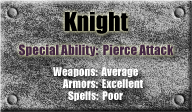
<style>
.page{position:relative;width:192px;height:112px}
.page>*{position:absolute;margin:0}
.t1{font:24px "Impact";color:#000000}
.t2{font:13px "Impact";color:#422742}
.t3{font:11px "Impact";color:#ffffff}
</style>
<div class="page">
<p class="t1" style="left:64px;top:12px;width:64px;height:22px">Knight</p>
<p class="t2" style="left:19px;top:44px;width:155px;height:13px">Special Ability:  Pierce Attack</p>
<p class="t3" style="left:53px;top:67px;width:85px;height:11px">Weapons:  Average</p>
<p class="t3" style="left:62px;top:79px;width:81px;height:9px">Armors:  Excellent</p>
<p class="t3" style="left:68px;top:91px;width:55px;height:10px">Spells:  Poor</p>
</div>
